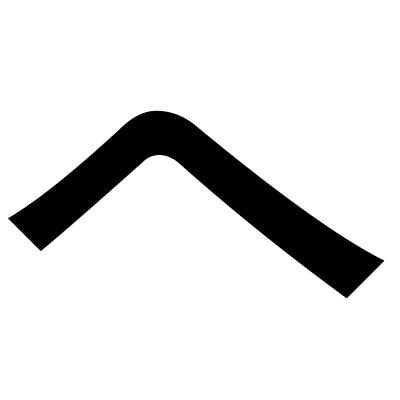
<style>
.page{position:relative;width:400px;height:400px;background:#ffffff}
.page>*{position:absolute;margin:0}
.t1{font:416.7px "MS-PGothic";color:#000000}
</style>
<div class="page">
<p class="t1" style="left:8px;top:110px;width:377px;height:189px">へ</p>
</div>
